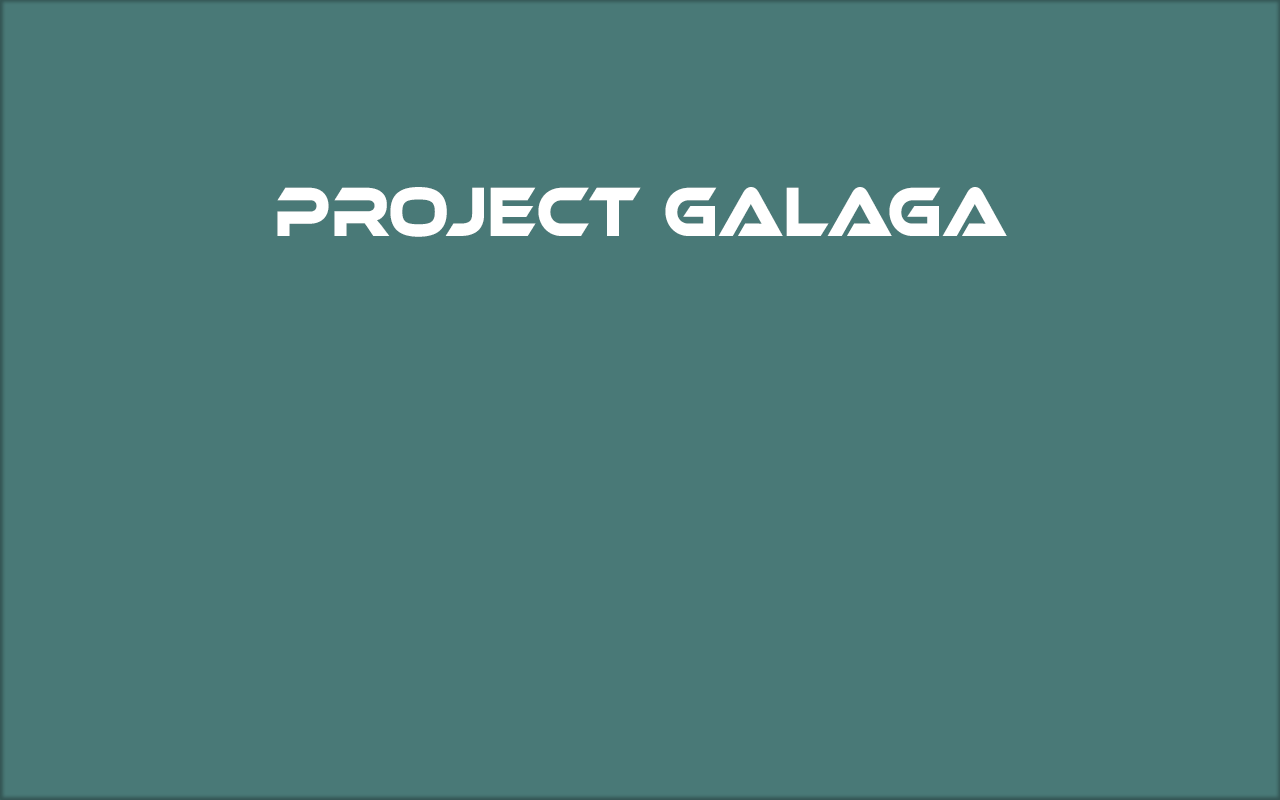
<style>
.page{position:relative;width:1280px;height:800px;background:#497977}
.page>*{position:absolute;margin:0}
.t1{font:72px "EthnocentricRg-Regular";color:#ffffff;scale:0.8 1}
</style>
<div class="page">
<p class="t1" style="left:277px;top:187px;width:730px;height:50px">PROJECT GALAGA</p>
</div>
